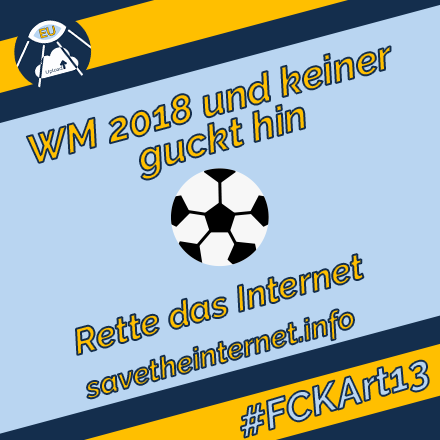
<style>
.page{position:relative;width:440px;height:440px;background:#b9d5f1}
.page>*{position:absolute;margin:0}
.t1{font:40px/36px "Raleway-BoldItalic";color:#ffbf00}
.t2{font:36px "Raleway-BoldItalic";color:#ffbf00}
.t3{font:30px "Raleway-BoldItalic";color:#ffbf00}
.t4{font:40px "Raleway-BoldItalic";color:#b9d6f2}
</style>
<div class="page">
<p class="t1" style="left:26px;top:46px;width:365px;height:134px;text-align:center;rotate:-15deg">WM 2018 und keiner <br>guckt hin</p>
<p class="t2" style="left:76px;top:254px;width:288px;height:101px;rotate:-15deg">Rette das Internet</p>
<p class="t3" style="left:87px;top:309px;width:267px;height:90px;rotate:-15deg">savetheinternet.info</p>
<p class="t4" style="left:241px;top:360px;width:188px;height:78px;rotate:-17deg">#FCKArt13</p>
</div>
